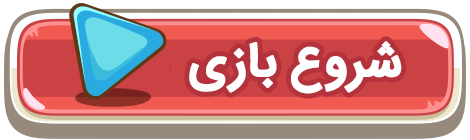
<style>
.page{position:relative;width:470px;height:140px;background:#cb4245}
.page>*{position:absolute;margin:0}
.t1{font:48px "IRANSansWeb-Bold";color:#ffffff;font-weight:bold}
</style>
<div class="page">
<p class="t1" style="left:189px;top:41px;width:213px;height:53px">شروع بازی</p>
</div>
